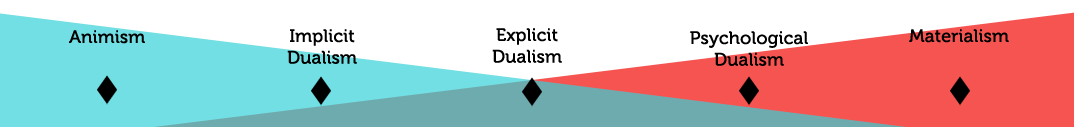
<style>
.page{position:relative;width:1074px;height:127px;background:#ffffff}
.page>*{position:absolute;margin:0}
.t1{font:18px "Museo500-Regular";letter-spacing:0.01em;color:#000000}
</style>
<div class="page">
<p class="t1" style="left:69px;top:30px;width:76px;height:14px">Animism</p>
<p class="t1" style="left:287px;top:29px;width:70px;height:35px;text-align:center">Implicit<br>Dualism</p>
<p class="t1" style="left:492px;top:28px;width:70px;height:35px;text-align:center">Explicit<br>Dualism</p>
<p class="t1" style="left:909px;top:29px;width:100px;height:14px">Materialism</p>
<p class="t1" style="left:690px;top:31px;width:118px;height:35px;text-align:center">Psychological<br>Dualism</p>
</div>
